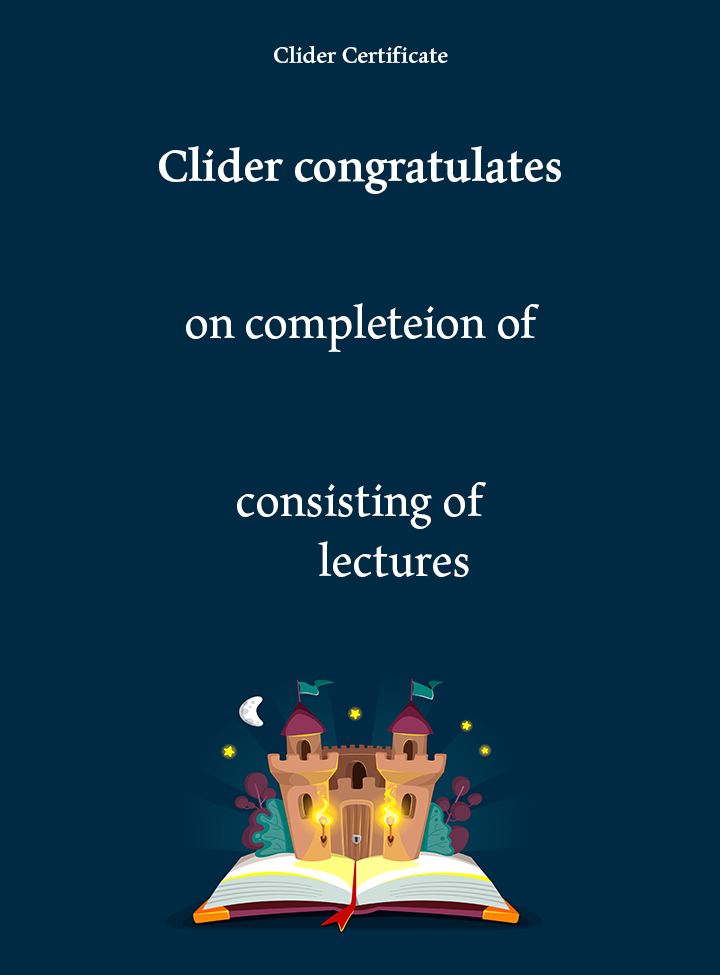
<style>
.page{position:relative;width:720px;height:975px;background:#002a43}
.page>*{position:absolute;margin:0}
.t1{font:25px "Maiola-Bold";color:#ffffff}
.t2{font:50px "Maiola-Bold";color:#ffffff}
.t3{font:50px "MaiolaBk-Book";color:#ffffff}
</style>
<div class="page">
<p class="t1" style="left:274px;top:46px;width:174px;height:18px">Clider Certificate</p>
<p class="t2" style="left:159px;top:146px;width:402px;height:48px">Clider congratulates</p>
<p class="t3" style="left:186px;top:303px;width:353px;height:49px">on completeion of</p>
<p class="t3" style="left:237px;top:482px;width:249px;height:95px;text-align:center">consisting of<br>       lectures</p>
</div>
